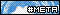
<style>
.page{position:relative;width:60px;height:15px;background:#000000}
.page>*{position:absolute;margin:0}
.t1{font:8px "04b08";color:#ffffff}
</style>
<div class="page">
<p class="t1" style="left:28px;top:7px;width:29px;height:5px">#meta</p>
</div>
